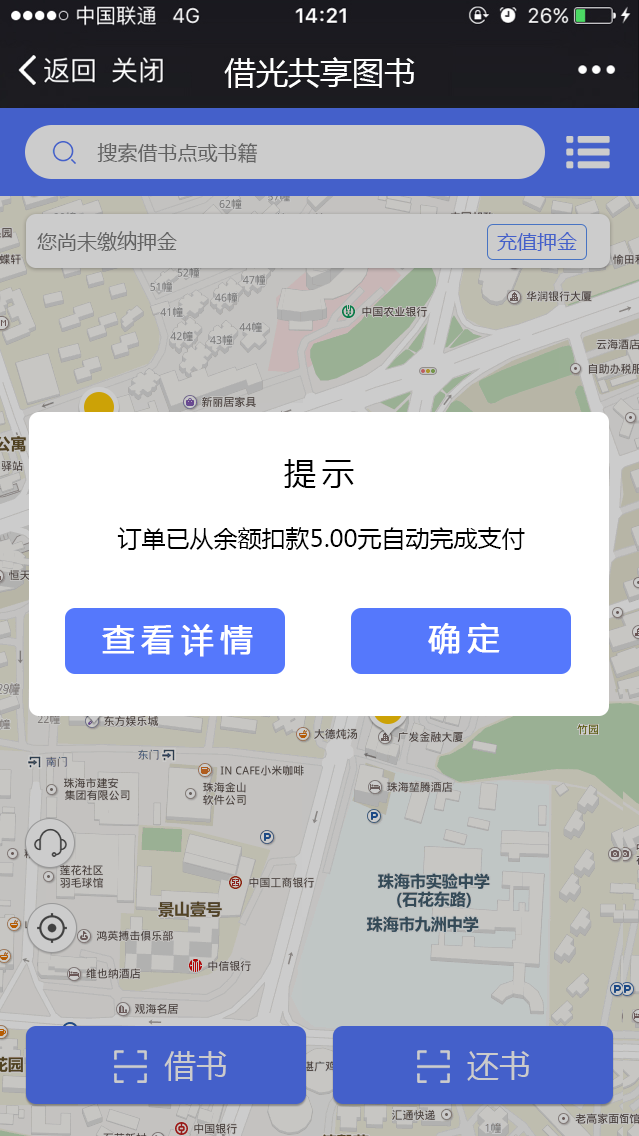
<style>
.page{position:relative;width:639px;height:1136px}
.page>*{position:absolute;margin:0}
.t1{font:20px "MicrosoftYaHei";color:#7a7a7a}
.t2{font:20px "MicrosoftYaHei";color:#4460ca}
.t3{font:32px "MicrosoftYaHei";letter-spacing:0.2em;color:#000000}
.t4{font:24px "MicrosoftYaHei";color:#000000}
.t5{font:32px "MicrosoftYaHei";letter-spacing:0.2em;color:#ffffff;font-weight:bold}
.t6{font:32px "MicrosoftYaHei";color:#cbcbcb}
</style>
<div class="page">
<p class="t1" style="left:97px;top:143px;width:161px;height:20px">搜索借书点或书籍</p>
<p class="t1" style="left:37px;top:231px;width:140px;height:21px">您尚未缴纳押金</p>
<p class="t2" style="left:497px;top:232px;width:80px;height:19px">充值押金</p>
<p class="t3" style="left:284px;top:459px;width:70px;height:29px">提示</p>
<p class="t4" style="left:117px;top:527px;width:408px;height:23px">订单已从余额扣款5.00元自动完成支付</p>
<p class="t5" style="left:102px;top:624px;width:151px;height:33px">查看详情</p>
<p class="t5" style="left:428px;top:623px;width:72px;height:32px">确定</p>
<p class="t6" style="left:164px;top:1051px;width:63px;height:30px">借书</p>
<p class="t6" style="left:467px;top:1051px;width:63px;height:30px">还书</p>
</div>
